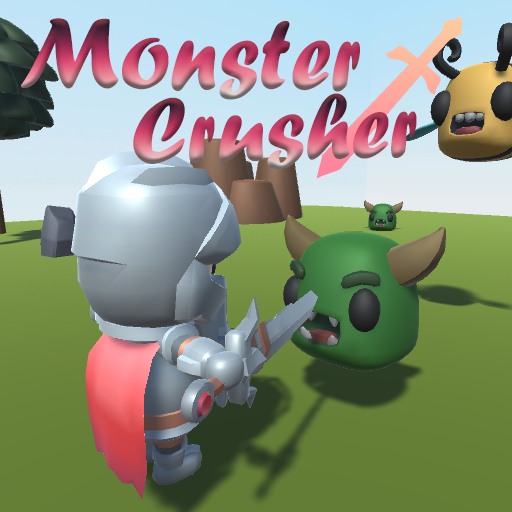
<style>
.page{position:relative;width:512px;height:512px}
.page>*{position:absolute;margin:0}
.t1{font:104.8px "ForteMT";scale:0.88 1}
.t2{font:97.5px "ForteMT";scale:0.93 1}
</style>
<div class="page">
<p class="t1" style="left:21px;top:18px;width:339px;height:82px;rotate:1deg">Monster</p>
<p class="t2" style="left:133px;top:93px;width:284px;height:77px;rotate:-1deg">Crusher</p>
</div>
